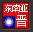
<style>
.page{position:relative;width:33px;height:32px;background:#f20000}
.page>*{position:absolute;margin:0}
.t1{font:10.4px "SimSun";letter-spacing:-0.25em;color:#ffffff}
.t2{font:11.7px "SimSun";color:#ffffff}
</style>
<div class="page">
<p class="t1" style="left:4px;top:4px;width:24px;height:9px">东南亚</p>
<p class="t2" style="left:16px;top:15px;width:11px;height:12px">晋</p>
</div>
